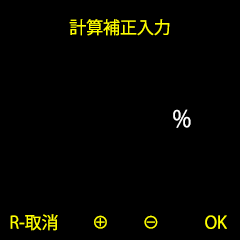
<style>
.page{position:relative;width:240px;height:240px;background:#000000}
.page>*{position:absolute;margin:0}
.t1{font:16.9px "KozGoPr6N-Regular";color:#ffff00}
.t2{font:23.1px "KozGoPr6N-Regular";color:#ffffff;scale:0.95 1}
</style>
<div class="page">
<p class="t1" style="left:69px;top:19px;width:101px;height:17px">計算補正入力</p>
<p class="t2" style="left:173px;top:109px;width:18px;height:19px">%</p>
<p class="t1" style="left:10px;top:214px;width:217px;height:17px">R-取消　　⊕　　⊖　 　  OK</p>
</div>
